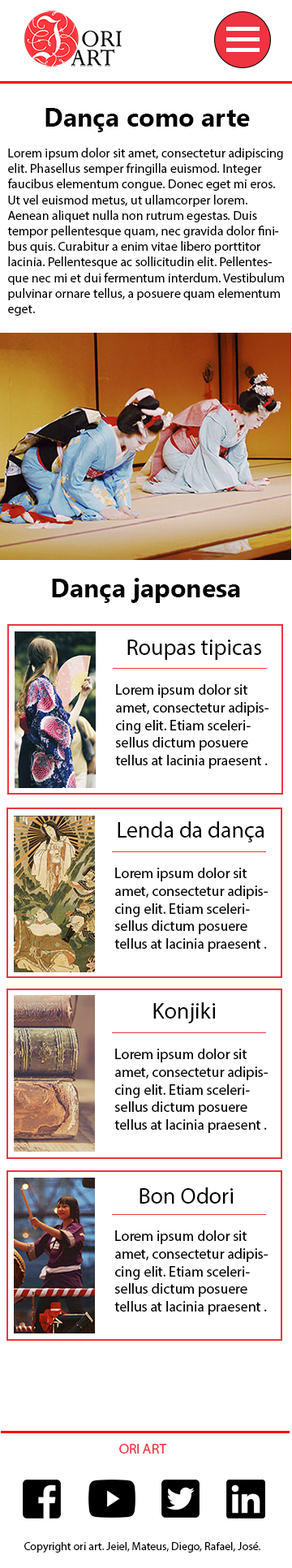
<style>
.page{position:relative;width:292px;height:1568px;background:#ffffff}
.page>*{position:absolute;margin:0}
.t1{font:26px "KhmerUI-Bold";color:#000000}
.t2{font:13px "MyriadPro-Regular";color:#000000}
.t3{font:22.7px "MyriadPro-Regular";color:#000000}
.t4{font:14.6px "MyriadPro-Regular";color:#000000}
</style>
<div class="page">
<p class="t1" style="left:45px;top:108px;width:205px;height:24px">Dança como arte</p>
<p class="t2" style="left:7px;top:148px;width:277px;height:168px">Lorem ipsum dolor sit amet, consectetur adipiscing elit. Phasellus semper fringilla euismod. Integer faucibus elementum congue. Donec eget mi eros. Ut vel euismod metus, ut ullamcorper lorem. Aenean aliquet nulla non rutrum egestas. Duis tempor pellentesque quam, nec gravida dolor finibus quis. Curabitur a enim vitae libero porttitor lacinia. Pellentesque ac sollicitudin elit. Pellentesque nec mi et dui fermentum interdum. Vestibulum pulvinar ornare tellus, a posuere quam elementum eget.</p>
<p class="t1" style="left:52px;top:578px;width:188px;height:25px">Dança japonesa</p>
<p class="t3" style="left:127px;top:640px;width:134px;height:20px">Roupas tipicas</p>
<p class="t4" style="left:115px;top:684px;width:154px;height:85px">Lorem ipsum dolor sit amet, consectetur adipiscing elit. Etiam scelerisellus dictum posuere tellus at lacinia praesent .</p>
<p class="t3" style="left:118px;top:821px;width:147px;height:21px">Lenda da dança</p>
<p class="t4" style="left:114px;top:868px;width:154px;height:84px">Lorem ipsum dolor sit amet, consectetur adipiscing elit. Etiam scelerisellus dictum posuere tellus at lacinia praesent .</p>
<p class="t3" style="left:153px;top:1002px;width:62px;height:21px">Konjiki</p>
<p class="t4" style="left:114px;top:1049px;width:154px;height:84px">Lorem ipsum dolor sit amet, consectetur adipiscing elit. Etiam scelerisellus dictum posuere tellus at lacinia praesent .</p>
<p class="t3" style="left:140px;top:1187px;width:93px;height:17px">Bon Odori</p>
<p class="t4" style="left:114px;top:1230px;width:154px;height:85px">Lorem ipsum dolor sit amet, consectetur adipiscing elit. Etiam scelerisellus dictum posuere tellus at lacinia praesent .</p>
</div>
